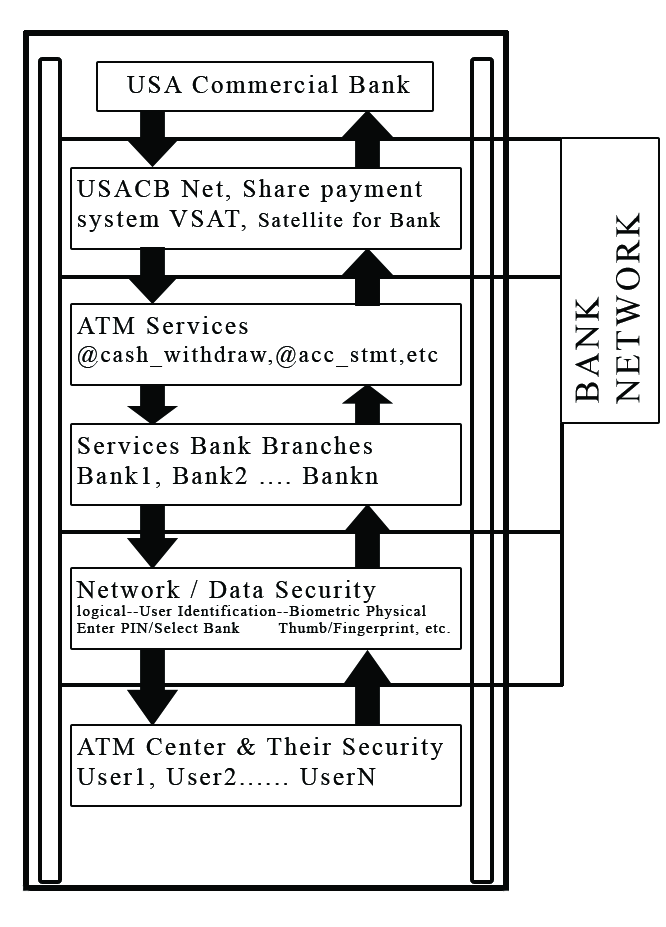
<style>
.page{position:relative;width:666px;height:927px;background:#ffffff}
.page>*{position:absolute;margin:0}
.t1{font:25px "TimesNewRomanPSMT";letter-spacing:0.1em;color:#060808}
.t2{font:20.8px "TimesNewRomanPSMT";letter-spacing:0.1em;color:#060808}
.t3{font:34px "TimesNewRomanPSMT";letter-spacing:0.1em;color:#060808}
.t4{font:22.9px "TimesNewRomanPSMT";letter-spacing:0.1em;color:#060808}
.t5{font:14.6px "TimesNewRomanPSMT";letter-spacing:0.1em;color:#060808}
</style>
<div class="page">
<p class="t1" style="left:127px;top:75px;width:283px;height:18px">USA Commercial Bank</p>
<p class="t1" style="left:77px;top:179px;width:363px;height:53px">USACB Net, Share payment <br>system VSAT, <span class="t2">Satellite for Bank</span></p>
<p class="t3" style="left:575px;top:212px;width:65px;height:192px;rotate:-90deg">BANK<br>NETWORK</p>
<p class="t4" style="left:77px;top:316px;width:361px;height:52px"><span class="t1">ATM Services<br></span>@cash_withdraw,@acc_stmt,etc</p>
<p class="t1" style="left:77px;top:436px;width:301px;height:52px">Services Bank Branches<br>Bank1, Bank2 .... Bankn</p>
<p class="t5" style="left:76px;top:580px;width:374px;height:56px"><span class="t1">Network / Data Security<br></span>logical--User Identification--Biometric Physical<br>Enter PIN/Select Bank     Thumb/Fingerprint, etc.</p>
<p class="t1" style="left:77px;top:737px;width:366px;height:52px">ATM Center &amp; Their Security<br>User1, User2...... UserN</p>
</div>
